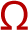
<style>
.page{position:relative;width:28px;height:30px;background:#ffffff}
.page>*{position:absolute;margin:0}
.t1{font:40px "Helvetica";letter-spacing:0.04em;color:#b60000}
</style>
<div class="page">
<p class="t1" style="left:0px;top:0px;width:28px;height:30px">Ω</p>
</div>
